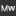
<style>
.page{position:relative;width:16px;height:16px;background:#333333}
.page>*{position:absolute;margin:0}
.t1{font:8px "Roboto-Thin";font-weight:bold}
.t2{font:8px "Roboto-Regular";font-weight:bold}
</style>
<div class="page">
<p class="t1" style="left:1px;top:5px;width:14px;height:7px">M<span class="t2">W</span></p>
</div>
